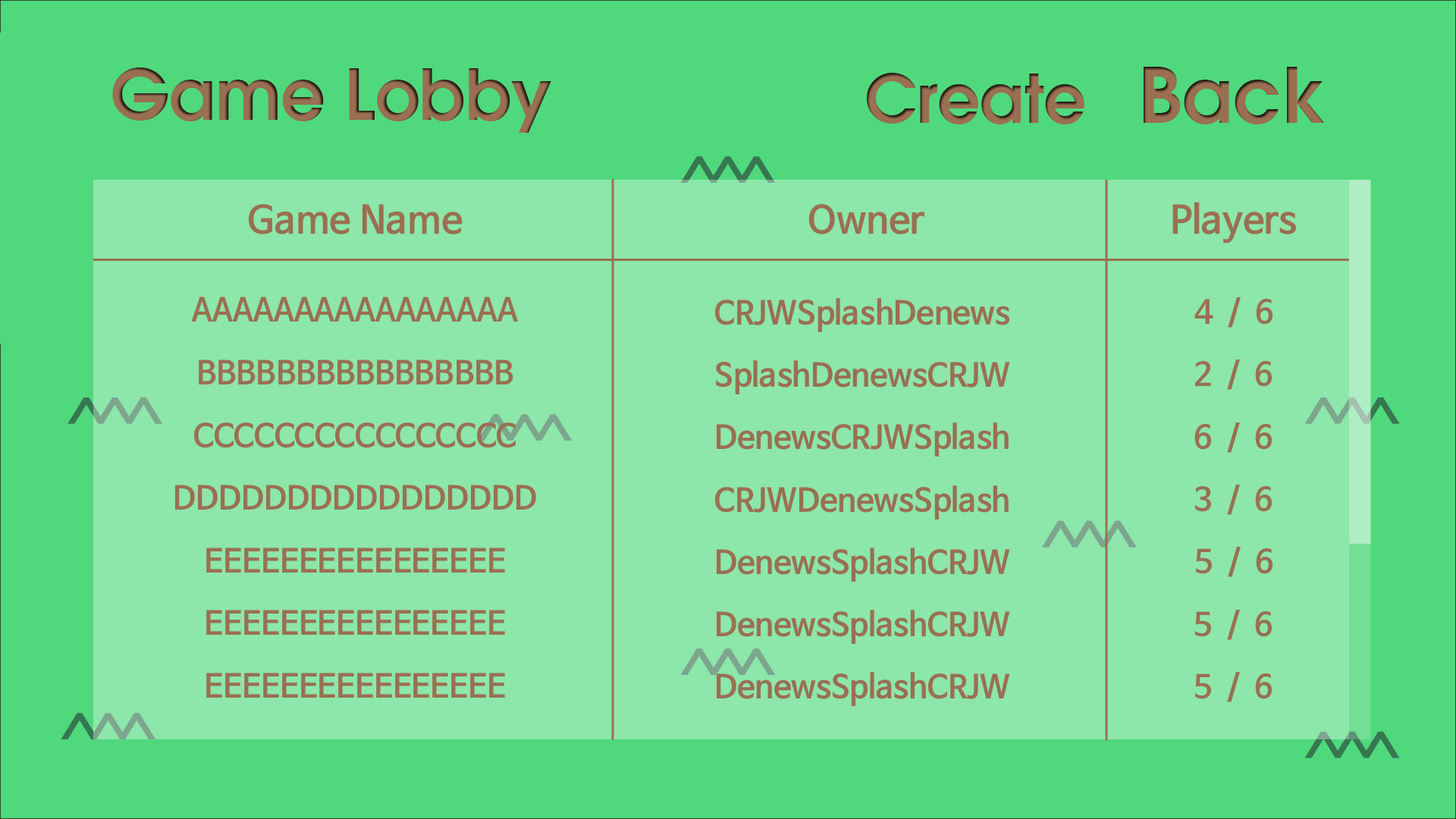
<style>
.page{position:relative;width:1456px;height:819px;background:#8de6aa}
.page>*{position:absolute;margin:0}
.t1{font:69.5px "AvantGarde-Demi";color:#9a6f52}
.t2{font:37.9px "NanumBarunGothicOTFBold";color:#9a6f52}
.t3{font:31.6px "NanumBarunGothicOTFBold";color:#9a6f52}
</style>
<div class="page">
<p class="t1" style="left:112px;top:67px;width:439px;height:66px">Game Lobby</p>
<p class="t2" style="left:249px;top:204px;width:214px;height:30px">Game Name</p>
<p class="t2" style="left:808px;top:204px;width:116px;height:30px">Owner</p>
<p class="t2" style="left:1172px;top:202px;width:124px;height:41px">Players</p>
<p class="t3" style="left:191px;top:297px;width:327px;height:25px">AAAAAAAAAAAAAAAA</p>
<p class="t3" style="left:714px;top:298px;width:296px;height:34px">CRJWSplashDenews</p>
<p class="t3" style="left:1194px;top:297px;width:79px;height:31px">4  /  6</p>
<p class="t3" style="left:199px;top:359px;width:314px;height:25px">BBBBBBBBBBBBBBBB</p>
<p class="t3" style="left:716px;top:360px;width:294px;height:34px">SplashDenewsCRJW</p>
<p class="t3" style="left:1195px;top:359px;width:77px;height:31px">2  /  6</p>
<p class="t3" style="left:193px;top:422px;width:323px;height:26px">CCCCCCCCCCCCCCCC</p>
<p class="t3" style="left:717px;top:422px;width:292px;height:35px">DenewsCRJWSplash</p>
<p class="t3" style="left:1194px;top:422px;width:78px;height:31px">6  /  6</p>
<p class="t3" style="left:175px;top:485px;width:361px;height:25px">DDDDDDDDDDDDDDDD</p>
<p class="t3" style="left:714px;top:485px;width:295px;height:34px">CRJWDenewsSplash</p>
<p class="t3" style="left:1195px;top:485px;width:77px;height:30px">3  /  6</p>
<p class="t3" style="left:206px;top:548px;width:299px;height:25px">EEEEEEEEEEEEEEEE</p>
<p class="t3" style="left:717px;top:548px;width:293px;height:34px">DenewsSplashCRJW</p>
<p class="t3" style="left:1195px;top:547px;width:78px;height:30px">5  /  6</p>
<p class="t3" style="left:206px;top:610px;width:299px;height:25px">EEEEEEEEEEEEEEEE</p>
<p class="t3" style="left:717px;top:610px;width:293px;height:34px">DenewsSplashCRJW</p>
<p class="t3" style="left:1194px;top:610px;width:78px;height:30px">5  /  6</p>
<p class="t3" style="left:206px;top:673px;width:299px;height:25px">EEEEEEEEEEEEEEEE</p>
<p class="t3" style="left:717px;top:672px;width:293px;height:34px">DenewsSplashCRJW</p>
<p class="t3" style="left:1194px;top:672px;width:78px;height:30px">5  /  6</p>
</div>
